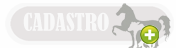
<style>
.page{position:relative;width:176px;height:48px;background:#e7e4e4}
.page>*{position:absolute;margin:0}
.t1{font:22.5px "BernardMT-Condensed";color:#f8f8f8}
</style>
<div class="page">
<p class="t1" style="left:23px;top:12px;width:86px;height:19px">CADASTRO</p>
</div>
